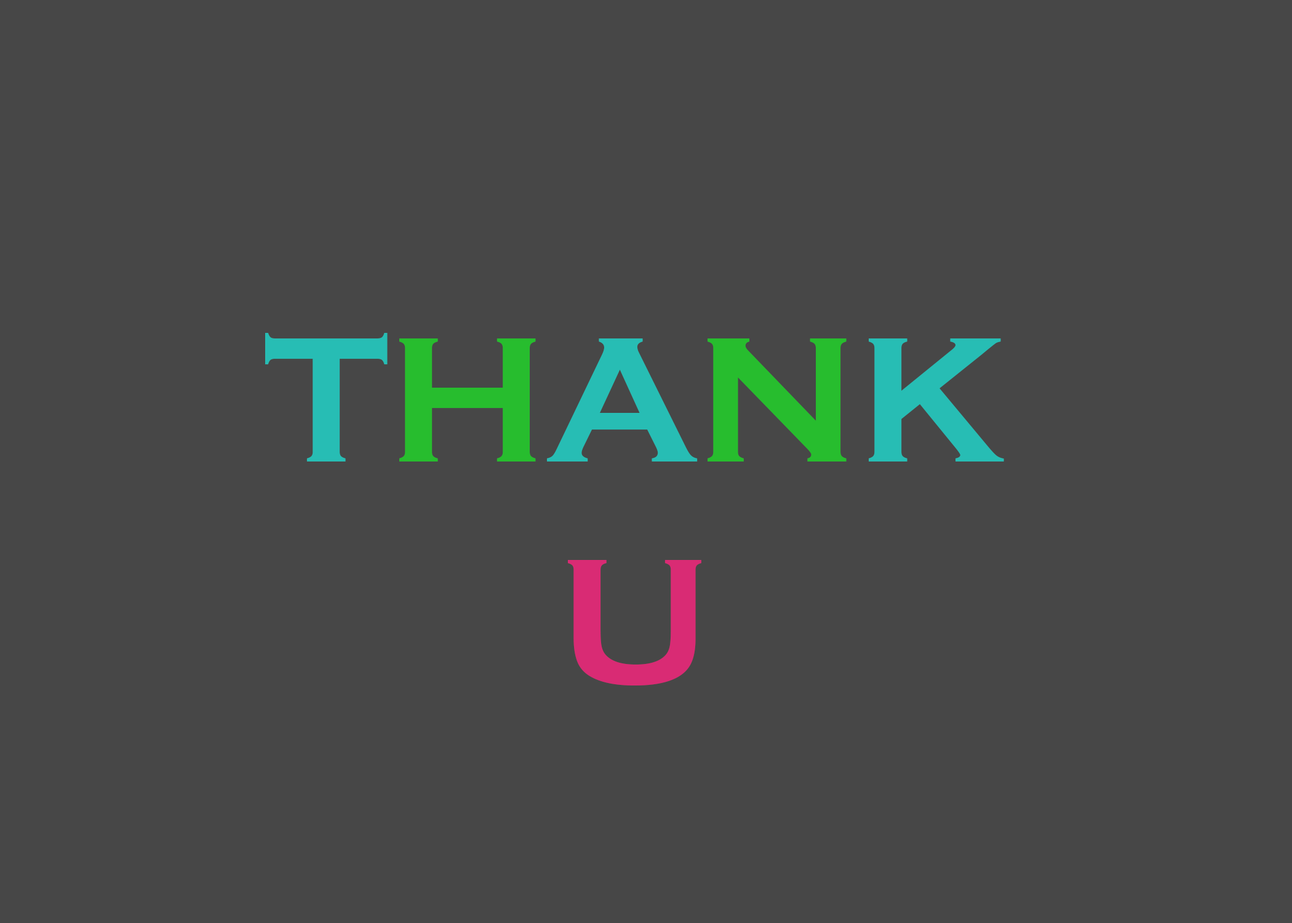
<style>
.page{position:relative;width:1292px;height:923px;background:#474747}
.page>*{position:absolute;margin:0}
.t1{font:184.6px "CopperplateGothic-Bold";color:#27bdb4}
.t2{font:184.6px "CopperplateGothic-Bold";color:#27bd2e}
.t3{font:184.6px "CopperplateGothic-Bold";color:#d92b74}
</style>
<div class="page">
<p class="t1" style="left:265px;top:333px;width:739px;height:352px;text-align:center">T<span class="t2">H</span>A<span class="t2">N</span>K <br><span class="t3">U</span></p>
</div>
